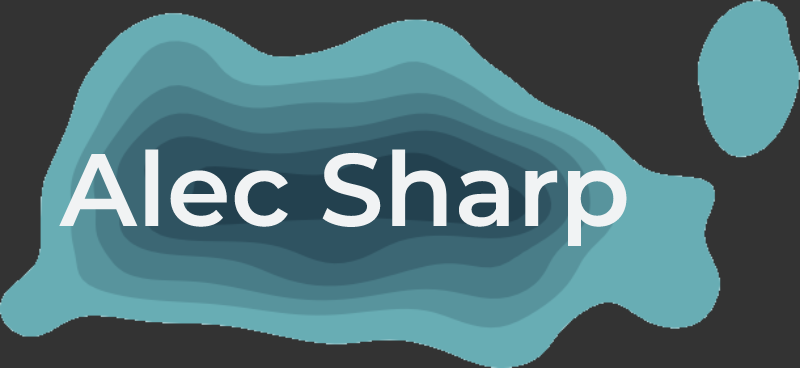
<style>
.page{position:relative;width:800px;height:368px;background:#333333}
.page>*{position:absolute;margin:0}
.t1{font:103px "Montserrat-SemiBold";color:#f1f3f4}
</style>
<div class="page">
<p class="t1" style="left:59px;top:149px;width:568px;height:97px">Alec Sharp</p>
</div>
